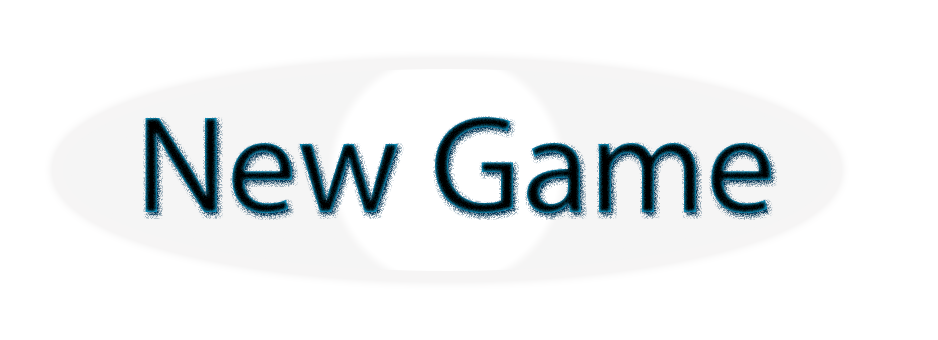
<style>
.page{position:relative;width:938px;height:340px;background:#ffffff}
.page>*{position:absolute;margin:0}
.t1{font:140px "MyriadHebrew-Regular"}
</style>
<div class="page">
<p class="t1" style="left:145px;top:117px;width:626px;height:97px">New Game</p>
</div>
